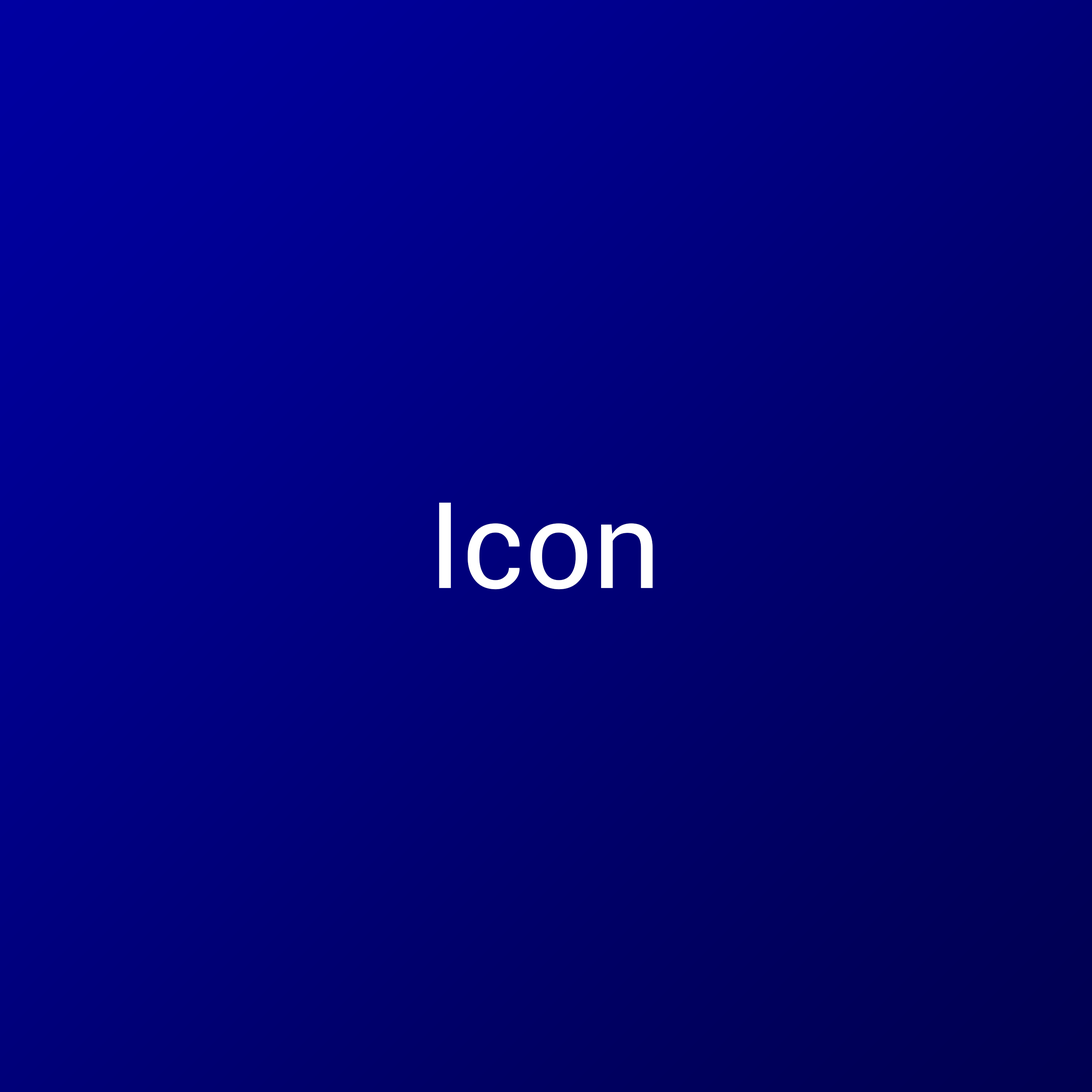
<style>
.page{position:relative;width:1092px;height:1092px}
.page>*{position:absolute;margin:0}
.t1{font:119.9px "Roboto-Regular";color:#ffffff}
</style>
<div class="page">
<p class="t1" style="left:439px;top:502px;width:214px;height:88px">Icon</p>
</div>
